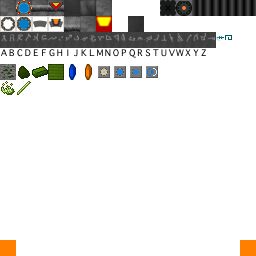
<style>
.page{position:relative;width:256px;height:256px;background:#ffffff}
.page>*{position:absolute;margin:0}
.t1{font:8px "Stargate-sg1_address_glyphs";color:#727272}
.t2{font:7px "Stargate-sg1_address_glyphs";color:#727272}
.t3{font:9px "Stargate-sg1_address_glyphs";color:#727272}
.t4{font:6px "Stargate-sg1_address_glyphs";color:#727272}
.t5{font:11px "Stargate-sg1_address_glyphs";color:#727272}
.t6{font:10px "Stargate-sg1_address_glyphs";color:#727272}
</style>
<div class="page">
<p class="t1" style="left:0px;top:33px;width:224px;height:10px"><span class="t2">A</span>BC<span class="t3">DE </span>FGHIJK<span class="t2">L</span>MNO<span class="t3">P</span>Q<span class="t4">R</span><span class="t2">S</span>T<span class="t2">U</span><span class="t3">V</span><span class="t5">W</span>X<span class="t3">Y</span><span class="t6">Z</span>ab</p>
</div>
